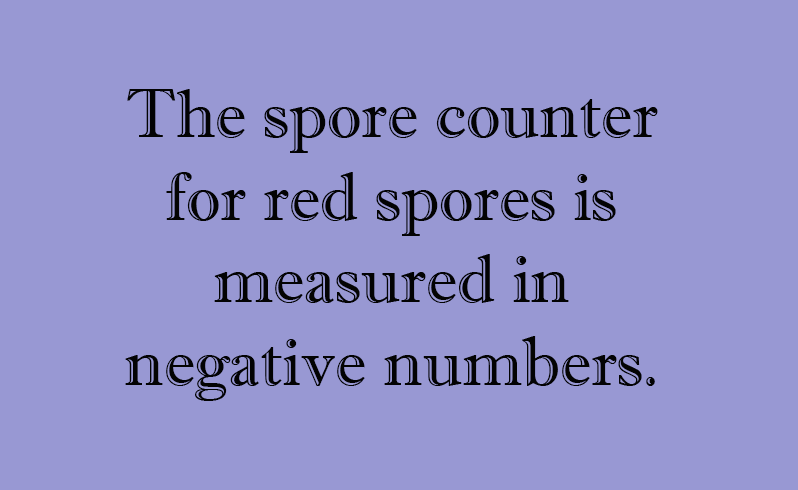
<style>
.page{position:relative;width:798px;height:490px;background:#9898d3}
.page>*{position:absolute;margin:0}
.t1{font:68.7px "ImprintMT-Shadow";color:#030303}
</style>
<div class="page">
<p class="t1" style="left:125px;top:89px;width:533px;height:312px;text-align:center">The spore counter <br>for red spores is <br>measured in <br>negative numbers.</p>
</div>
